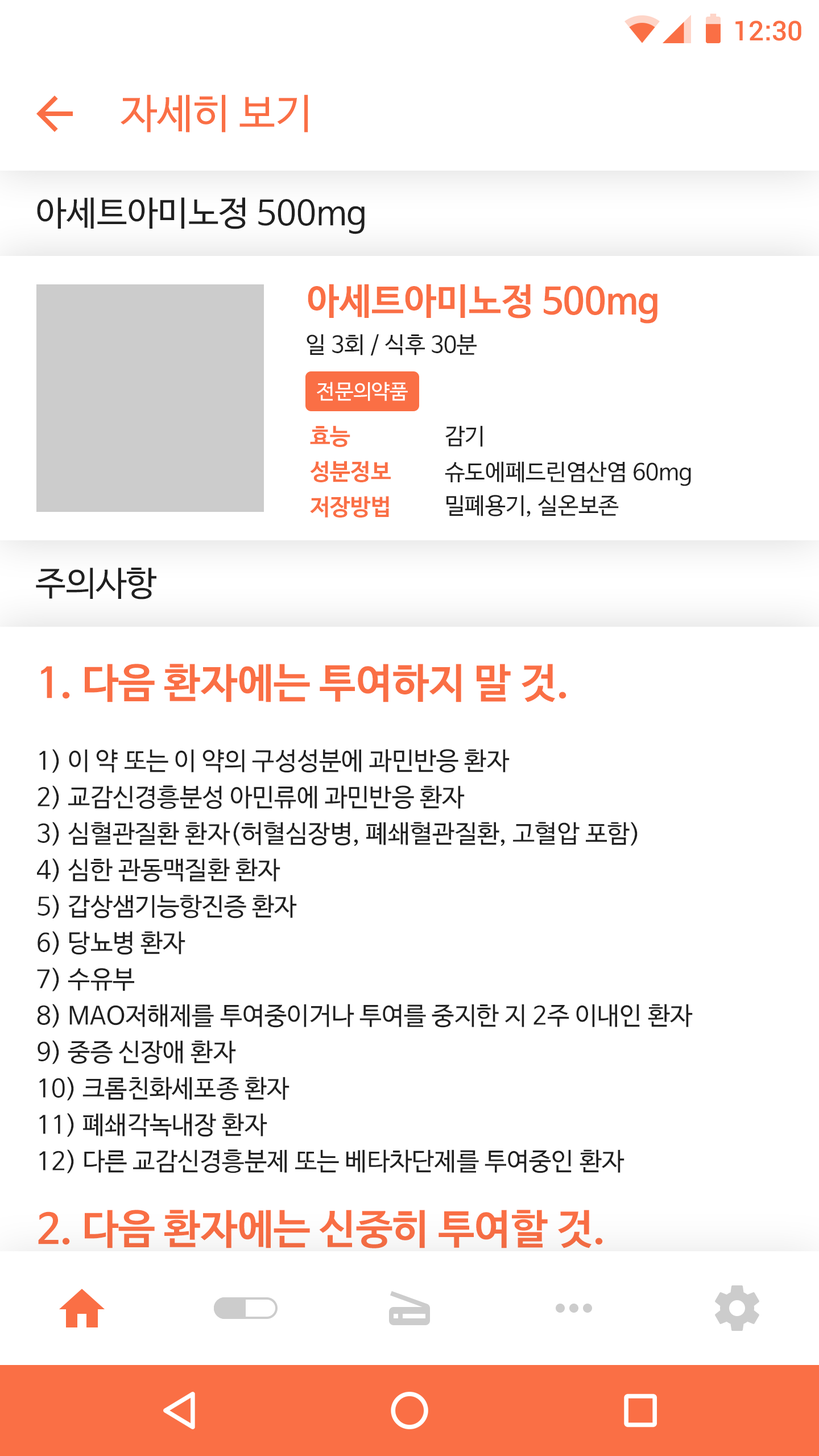
<style>
.page{position:relative;width:819px;height:1456px;background:#ffffff}
.page>*{position:absolute;margin:0}
.t1{font:27.3px "Roboto-Medium";color:#fa6f45}
.t2{font:40.9px "NanumBarunGothic";color:#fa6f45}
.t3{font:34.1px "NanumBarunGothic";color:#202020}
.t4{font:36.4px "NanumBarunGothicBold";color:#fa6f45}
.t5{font:22.7px "NanumBarunGothic";color:#222222}
.t6{font:20.5px "NanumBarunGothic";color:#ffffff}
.t7{font:22.7px "NanumBarunGothicBold";color:#fa6f45}
.t8{font:25px/36.4px "NanumBarunGothic";color:#202020}
.t9{font:40.9px/36.4px "NanumBarunGothicBold";color:#fa6f45}
</style>
<div class="page">
<p class="t1" style="left:735px;top:20px;width:66px;height:21px">12:30</p>
<p class="t2" style="left:121px;top:94px;width:187px;height:39px">자세히 보기</p>
<p class="t3" style="left:37px;top:197px;width:328px;height:37px">아세트아미노정 500mg</p>
<p class="t4" style="left:308px;top:284px;width:349px;height:40px">아세트아미노정 500mg</p>
<p class="t5" style="left:307px;top:334px;width:170px;height:21px">일 3회 / 식후 30분</p>
<p class="t6" style="left:317px;top:382px;width:91px;height:19px">전문의약품</p>
<p class="t7" style="left:310px;top:425px;width:40px;height:22px">효능</p>
<p class="t5" style="left:445px;top:425px;width:38px;height:22px">감기</p>
<p class="t7" style="left:310px;top:461px;width:81px;height:21px">성분정보</p>
<p class="t5" style="left:445px;top:461px;width:246px;height:25px">슈도에페드린염산염 60mg</p>
<p class="t7" style="left:310px;top:496px;width:79px;height:22px">저장방법</p>
<p class="t5" style="left:446px;top:495px;width:173px;height:22px">밀폐용기, 실온보존</p>
<p class="t3" style="left:36px;top:568px;width:120px;height:31px">주의사항</p>
<p class="t8" style="left:37px;top:664px;width:656px;height:764px"><span class="t9">1. 다음 환자에는 투여하지 말 것.<br></span><br>1) 이 약 또는 이 약의 구성성분에 과민반응 환자<br>2) 교감신경흥분성 아민류에 과민반응 환자<br>3) 심혈관질환 환자(허혈심장병, 폐쇄혈관질환, 고혈압 포함)<br>4) 심한 관동맥질환 환자<br>5) 갑상샘기능항진증 환자<br>6) 당뇨병 환자<br>7) 수유부<br>8) MAO저해제를 투여중이거나 투여를 중지한 지 2주 이내인 환자<br>9) 중증 신장애 환자<br>10) 크롬친화세포종 환자<br>11) 폐쇄각녹내장 환자<br>12) 다른 교감신경흥분제 또는 베타차단제를 투여중인 환자<br><br><span class="t9">2. 다음 환자에는 신중히 투여할 것.<br></span><br>1) 전립선비대증 또는 방광 기능이상 환자<br>2) 디기탈리스제제를 투여 받고 있는 환자<br>3) 안내압 상승 환자<br>4) 중증 간부전 환자</p>
</div>
